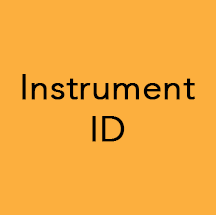
<style>
.page{position:relative;width:216px;height:215px;background:#fcaf3e}
.page>*{position:absolute;margin:0}
.t1{font:35px "Avenir-Light";color:#000000;font-weight:bold}
</style>
<div class="page">
<p class="t1" style="left:22px;top:74px;width:173px;height:68px;text-align:center">Instrument<br>ID</p>
</div>
